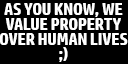
<style>
.page{position:relative;width:128px;height:64px;background:#000000}
.page>*{position:absolute;margin:0}
.t1{font:16px/14.9px "HPSimplified-Bold";letter-spacing:-0.01em;color:#ffffff}
</style>
<div class="page">
<p class="t1" style="left:0px;top:3px;width:128px;height:59px;text-align:center">AS YOU KNOW, WE<br>VALUE PROPERTY<br>OVER HUMAN LIVES<br>;)</p>
</div>
